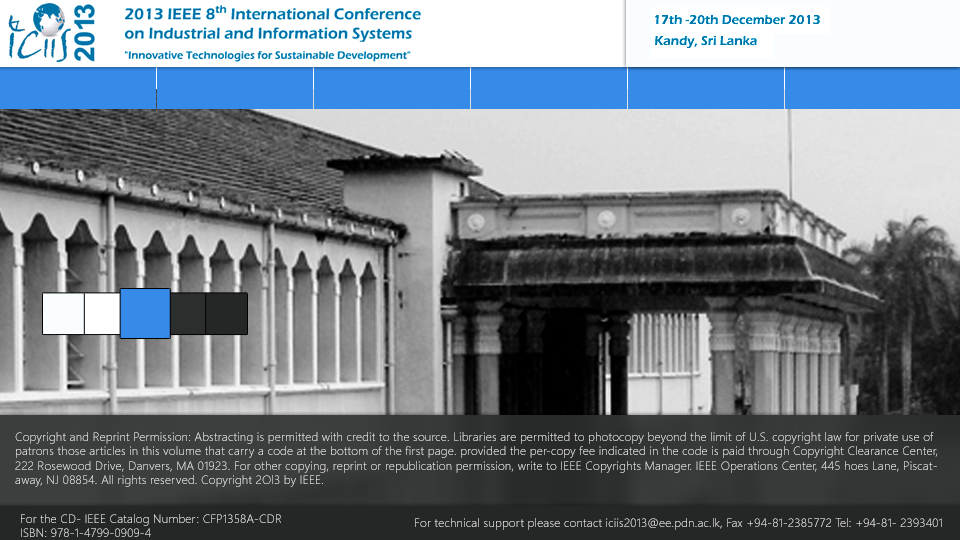
<style>
.page{position:relative;width:960px;height:540px}
.page>*{position:absolute;margin:0}
.t1{font:12px "SegoeUI-Light";letter-spacing:0.015em;color:#ffffff}
.t2{font:12px "SegoeUI-Light";letter-spacing:0.015em}
</style>
<div class="page">
<p class="t1" style="left:15px;top:432px;width:923px;height:55px">Copyright and Reprint Permission: Abstracting is permitted with credit to the source. Libraries are permitted to photocopy beyond the limit of U.S. copyright law for private use of patrons those articles in this volume that carry a code at the bottom of the first page. provided the per-copy fee indicated in the code is paid through Copyright Clearance Center, 222 Rosewood Drive, Danvers, MA 01923. For other copying, reprint or republication permission, write to IEEE Copyrights Manager. IEEE Operations Center, 445 hoes Lane, Piscataway, NJ 08854. All rights reserved. Copyright 2Ol3 by IEEE.<br>For the CD- IEEE Catalog Number: CFP1358A-CDR <br>ISBN: 978-1-4799-0909-4<br>For technical support please contact iciis2013@ee.pdn.ac.lk, Fax +94-81-2385772 Tel: +94-81- 2393401</p>
<p class="t1" style="left:21px;top:514px;width:260px;height:23px">For the CD- IEEE Catalog Number: CFP1358A-CDR <br>ISBN: 978-1-4799-0909-4</p>
<p class="t2" style="left:415px;top:518px;width:527px;height:12px">For technical support please contact iciis2013@ee.pdn.ac.lk, Fax +94-81-2385772 Tel: +94-81- 2393401</p>
</div>
